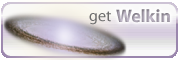
<style>
.page{position:relative;width:180px;height:60px}
.page>*{position:absolute;margin:0}
.t1{font:16px "Myriad-Roman";color:#6d6d6d}
.t2{font:18px "Myriad-Bold";color:#a69fad}
</style>
<div class="page">
<p class="t1" style="left:89px;top:11px;width:22px;height:14px">get</p>
<p class="t2" style="left:116px;top:9px;width:54px;height:14px">Welkin</p>
</div>
